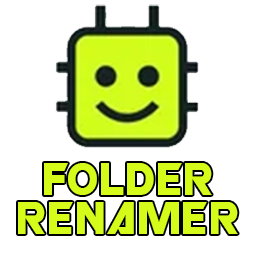
<style>
.page{position:relative;width:256px;height:256px;background:#ffffff}
.page>*{position:absolute;margin:0}
.t1{font:39.6px/39.6px "ROBO";letter-spacing:0.05em;color:#d5fb1b}
</style>
<div class="page">
<p class="t1" style="left:18px;top:163px;width:220px;height:71px;text-align:center">Folder<br>Renamer</p>
</div>
